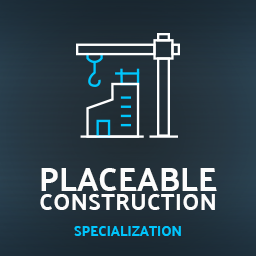
<style>
.page{position:relative;width:256px;height:256px}
.page>*{position:absolute;margin:0}
.t1{font:33px "PalanquinDark-Regular";color:#fcfcfc;text-transform:uppercase}
.t2{font:23px "PalanquinDark-Regular";letter-spacing:0.02em;color:#fcfcfc;text-transform:uppercase}
.t3{font:14px "PalanquinDark-Regular";color:#00c6fd;text-transform:uppercase}
</style>
<div class="page">
<p class="t1" style="left:41px;top:168px;width:176px;height:23px">Placeable</p>
<p class="t2" style="left:40px;top:194px;width:175px;height:16px">CONSTRUCTION</p>
<p class="t3" style="left:74px;top:226px;width:107px;height:10px">Specialization</p>
</div>
